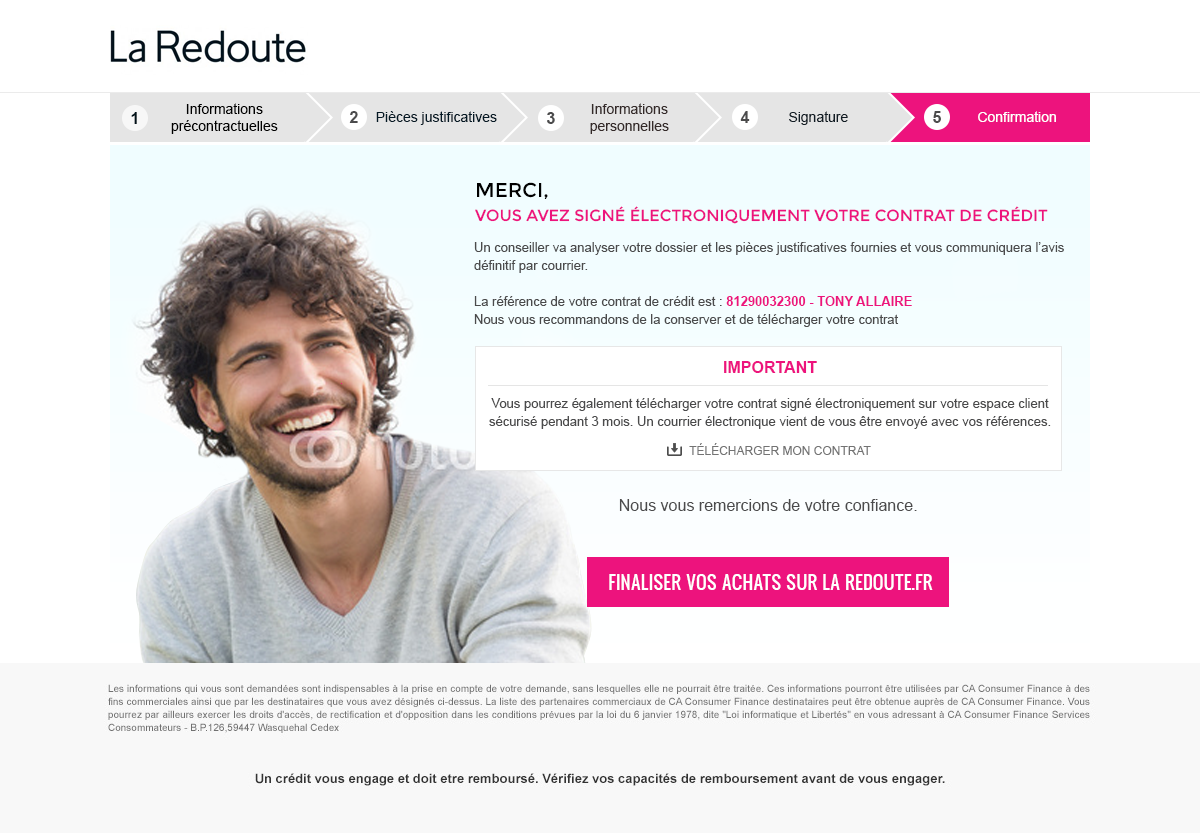
<style>
.page{position:relative;width:1200px;height:833px;background:#ffffff}
.page>*{position:absolute;margin:0}
.t1{font:16px "Arial-BoldMT";color:#01121a}
.t2{font:14px "ArialMT";color:#000000}
.t3{font:16px "Arial-BoldMT";color:#4b4b4c}
.t4{font:14px "ArialMT";color:#051925}
.t5{font:14px "ArialMT";color:#342a29}
.t6{font:14px "ArialMT";color:#111c24}
.t7{font:14px "ArialMT";color:#ffffff}
.t8{font:16px/24px "Montserrat-Regular";color:#ed137d;text-transform:uppercase}
.t9{font:20px/24px "Montserrat-Regular";color:#000000;text-transform:uppercase}
.t10{font:13px/18px "ArialMT";color:#4b4b4c}
.t11{font:13px/18px "Arial-BoldMT";color:#ed137d}
.t12{font:16px/18px "Arial-BoldMT";color:#ed137d}
.t13{font:13px/35px "ArialMT";color:#4b4b4c}
.t14{font:12px "ArialMT";color:#737373;text-transform:uppercase}
.t15{font:16px "ArialMT";color:#4b4b4c}
.t16{font:18px "Oswald";color:#ffffff;text-transform:uppercase}
</style>
<div class="page">
<p class="t1" style="left:131px;top:112px;width:6px;height:12px">1</p>
<p class="t2" style="left:171px;top:103px;width:107px;height:31px;text-align:center">Informations<br>précontractuelles</p>
<p class="t3" style="left:349px;top:111px;width:9px;height:12px">2</p>
<p class="t4" style="left:376px;top:111px;width:121px;height:14px">Pièces justificatives</p>
<p class="t3" style="left:547px;top:112px;width:8px;height:12px">3</p>
<p class="t5" style="left:590px;top:103px;width:79px;height:31px;text-align:center">Informations<br>personnelles</p>
<p class="t3" style="left:740px;top:111px;width:10px;height:12px">4</p>
<p class="t6" style="left:789px;top:111px;width:59px;height:14px">Signature</p>
<p class="t3" style="left:933px;top:111px;width:8px;height:12px">5</p>
<p class="t7" style="left:978px;top:111px;width:78px;height:11px">Confirmation</p>
<p class="t8" style="left:475px;top:182px;width:573px;height:42px"><span class="t9">merci,<br></span>vous avez signé électroniquement votre contrat de crédit</p>
<p class="t10" style="left:474px;top:242px;width:590px;height:85px">Un conseiller va analyser votre dossier et les pièces justificatives fournies et vous communiquera l’avis définitif par courrier.<br><br>La référence de votre contrat de crédit est : <span class="t11">81290032300 - TONY ALLAIRE<br></span>Nous vous recommandons de la conserver et de télécharger votre contrat</p>
<p class="t10" style="left:489px;top:361px;width:562px;height:68px;text-align:center"><span class="t12">IMPORTANT<br></span><span class="t13">Vous pourrez également télécharger votre contrat signé électroniquement sur votre espace client </span>sécurisé pendant 3 mois. Un courrier électronique vient de vous être envoyé avec vos références.</p>
<p class="t14" style="left:689px;top:443px;width:182px;height:12px">télécharger mon contrat</p>
<p class="t15" style="left:619px;top:499px;width:298px;height:12px">Nous vous remercions de votre confiance.</p>
<p class="t16" style="left:609px;top:574px;width:324px;height:16px">finaliser vos achats sur la redoute.fr</p>
</div>
